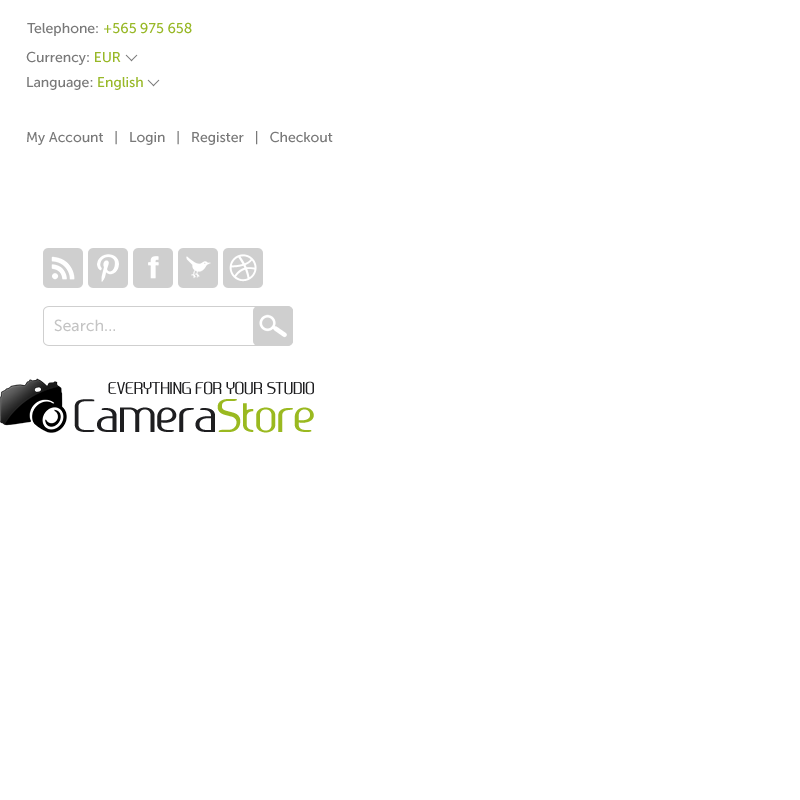
<style>
.page{position:relative;width:800px;height:800px;background:#ffffff}
.page>*{position:absolute;margin:0}
.t1{font:14px "MuseoSans-500";color:#98b827}
.t2{font:14px "MuseoSans-500";color:#797979}
.t3{font:16px "MuseoSans-500";color:#c4c4c4}
.t4{font:16px "Ageone";color:#1e1e20}
.t5{font:44px "Ageone";color:#1e1e20}
.t6{font:44px "Ageone";color:#9ab920}
</style>
<div class="page">
<p class="t1" style="left:27px;top:22px;width:165px;height:14px"><span class="t2">Telephone: </span>+565 975 658</p>
<p class="t2" style="left:26px;top:51px;width:95px;height:14px">Currency: <span class="t1">EUR</span></p>
<p class="t2" style="left:27px;top:77px;width:116px;height:13px">Language: <span class="t1">English</span></p>
<p class="t2" style="left:27px;top:131px;width:306px;height:14px">My Account   |   Login   |   Register   |   Checkout</p>
<p class="t3" style="left:54px;top:319px;width:61px;height:13px">Search...</p>
<p class="t4" style="left:108px;top:381px;width:206px;height:14px">EVERYTHING FOR YOUR STUDIO</p>
<p class="t5" style="left:74px;top:399px;width:240px;height:34px">Camera<span class="t6">Store</span></p>
</div>
